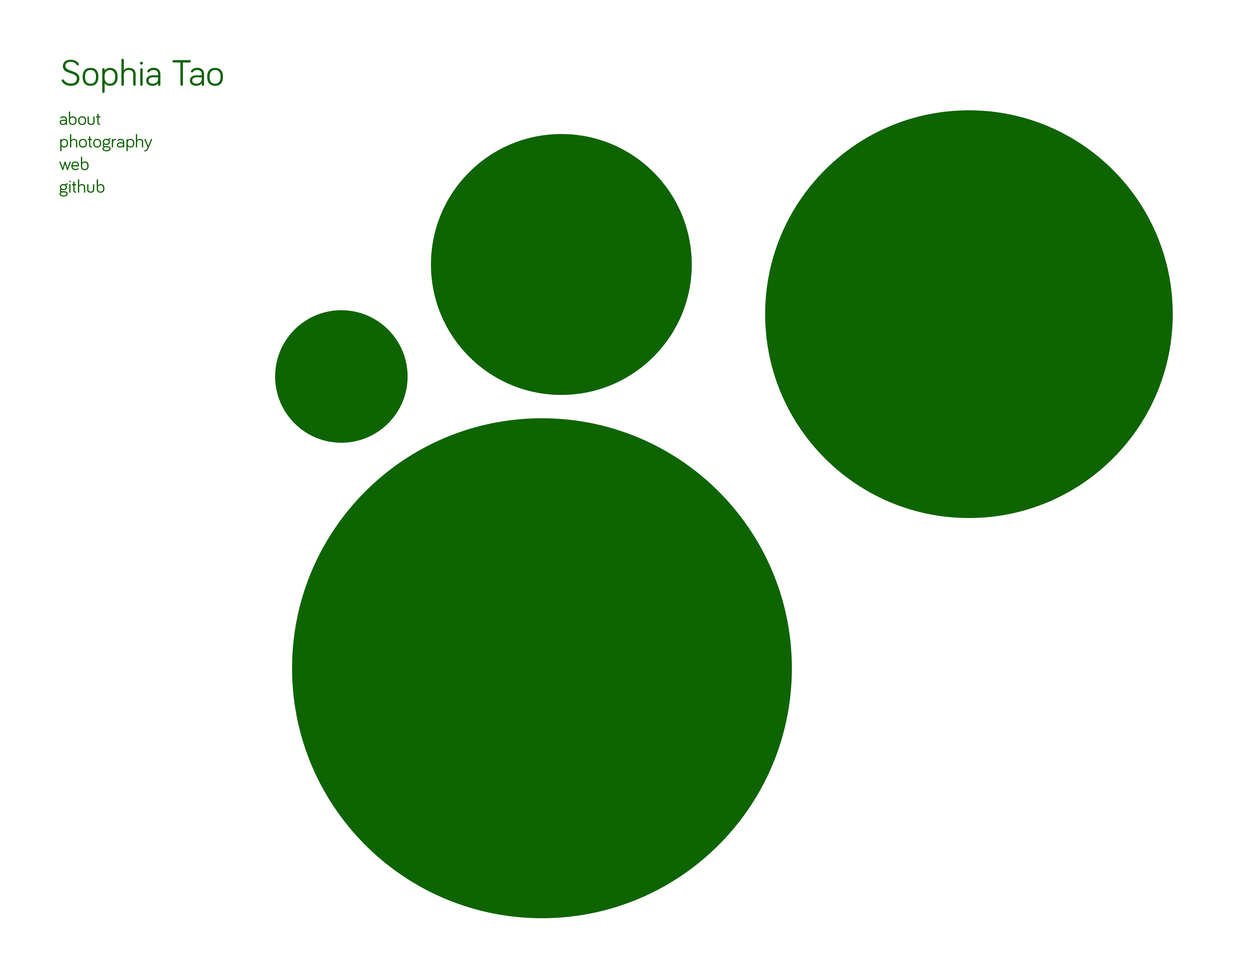
<style>
.page{position:relative;width:1242px;height:960px;background:#ffffff}
.page>*{position:absolute;margin:0}
.t1{font:37.6px "Bariol-Regular";color:#0f6402}
.t2{font:18.8px "Bariol-Regular";color:#0f6402}
</style>
<div class="page">
<p class="t1" style="left:61px;top:59px;width:162px;height:34px">Sophia Tao</p>
<p class="t2" style="left:59px;top:111px;width:93px;height:85px">about<br>photography<br>web<br>github</p>
</div>
